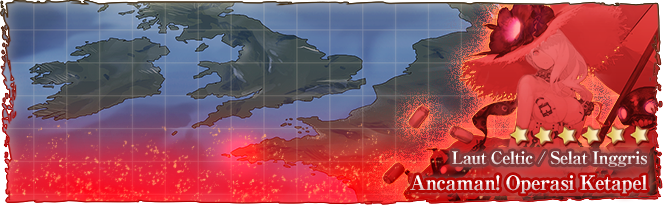
<style>
.page{position:relative;width:663px;height:205px}
.page>*{position:absolute;margin:0}
.t1{font:17px "RyuminPro-ExBold";letter-spacing:-0.04em}
.t2{font:20px "RyuminPro-ExBold";letter-spacing:-0.04em}
</style>
<div class="page">
<p class="t1" style="left:452px;top:151px;width:195px;height:16px">Laut Celtic / Selat Inggris</p>
<p class="t2" style="left:410px;top:175px;width:237px;height:19px">Ancaman! Operasi Ketapel</p>
</div>
